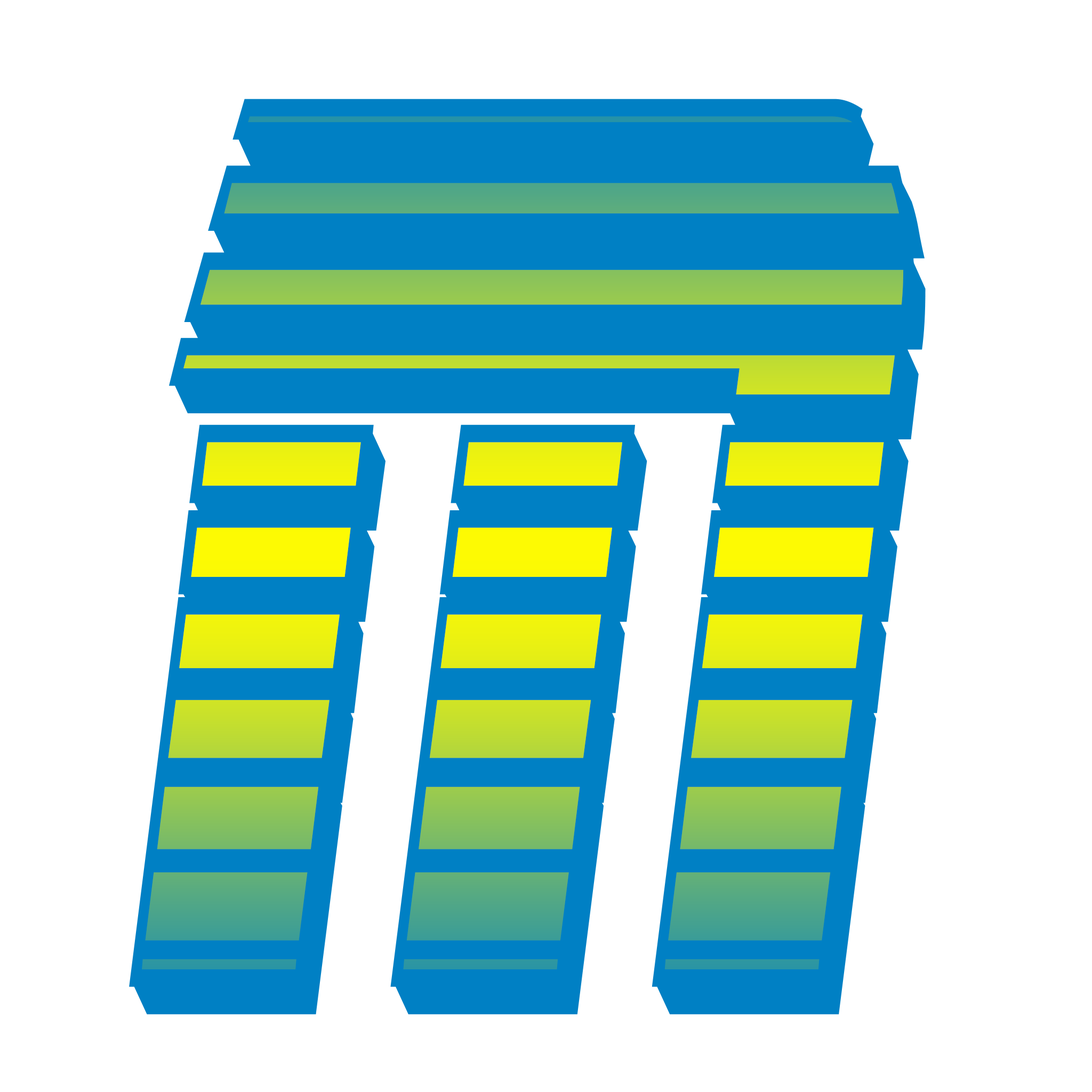
<style>
.page{position:relative;width:1092px;height:1092px;background:#ffffff}
.page>*{position:absolute;margin:0}
.t1{font:1448.3px "EdgeRacerChromeItalic";color:#0080c4;scale:0.59 1}
</style>
<div class="page">
<p class="t1" style="left:129px;top:99px;width:797px;height:916px">M</p>
</div>
